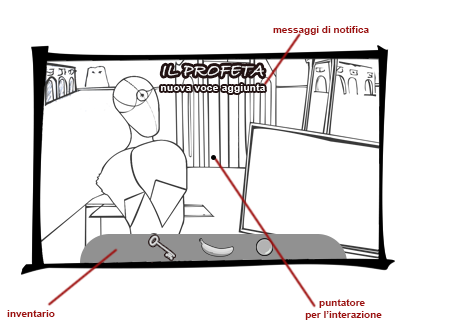
<style>
.page{position:relative;width:462px;height:329px;background:#ffffff}
.page>*{position:absolute;margin:0}
.t1{font:10px "Arial-BoldMT";color:#9e100f}
.t2{font:17.3px "BradleyHandITC";color:#ffffff;text-transform:uppercase;font-weight:bold;font-style:italic}
.t3{font:10px "Arial-BoldMT";letter-spacing:0.03em;color:#ffffff}
</style>
<div class="page">
<p class="t1" style="left:273px;top:26px;width:96px;height:9px">messaggi di notifica</p>
<p class="t2" style="left:162px;top:65px;width:102px;height:12px">il profeta</p>
<p class="t3" style="left:161px;top:84px;width:104px;height:9px">nuova voce aggiunta</p>
<p class="t1" style="left:305px;top:299px;width:77px;height:21px;text-align:center">puntatore <br>per l’interazione</p>
<p class="t1" style="left:7px;top:310px;width:48px;height:7px">inventario</p>
</div>
